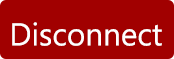
<style>
.page{position:relative;width:174px;height:59px;background:#a10000}
.page>*{position:absolute;margin:0}
.t1{font:29.2px "MicrosoftJhengHeiUIRegular";color:#ffffff}
</style>
<div class="page">
<p class="t1" style="left:12px;top:22px;width:150px;height:24px">Disconnect</p>
</div>
